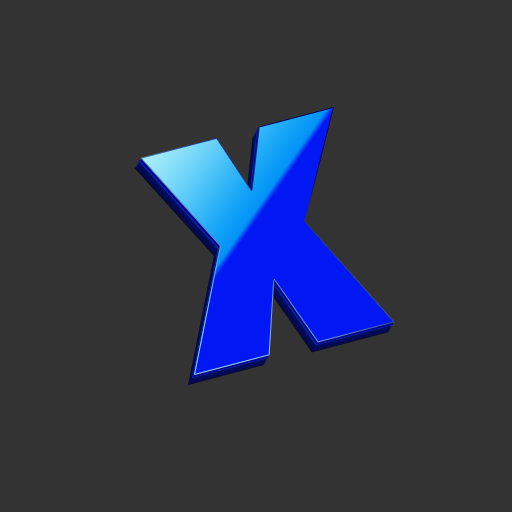
<style>
.page{position:relative;width:512px;height:512px;background:#333333}
.page>*{position:absolute;margin:0}
.t1{font:320.4px "FiraSans-Ultra"}
</style>
<div class="page">
<p class="t1" style="left:140px;top:106px;width:255px;height:270px;rotate:-15deg">X</p>
</div>
